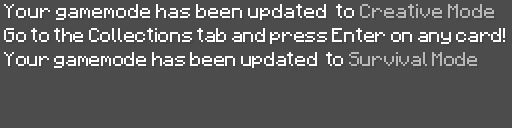
<style>
.page{position:relative;width:512px;height:128px;background:#4c4c4c}
.page>*{position:absolute;margin:0}
.t1{font:16px "Minecraftia-Regular";color:#ffffff}
.t2{font:16px "Minecraftia-Regular";color:#b9b9b9}
.t3{font:16px "Minecraftia-Regular";letter-spacing:-0.02em;color:#ffffff}
.t4{font:16px "Minecraftia-Regular";letter-spacing:-0.02em;color:#b9b9b9}
</style>
<div class="page">
<p class="t1" style="left:4px;top:4px;width:490px;height:16px">Your gamemode has been updated  to <span class="t2">Creative Mode</span></p>
<p class="t3" style="left:4px;top:28px;width:501px;height:16px">Go to the Collections tab and press Enter on any card!</p>
<p class="t3" style="left:4px;top:52px;width:473px;height:16px">Your gamemode has been updated  to <span class="t4">Survival Mode</span></p>
</div>
